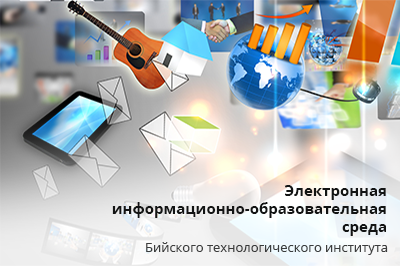
<style>
.page{position:relative;width:400px;height:266px}
.page>*{position:absolute;margin:0}
.t1{font:15px "OpenSans-Bold";color:#131414}
.t2{font:13px "OpenSans";color:#3b3d3d}
</style>
<div class="page">
<p class="t1" style="left:112px;top:185px;width:274px;height:51px;text-align:right">Электронная<br>информационно-образовательная<br>среда</p>
<p class="t2" style="left:146px;top:242px;width:242px;height:13px">Бийского технологического института</p>
</div>
